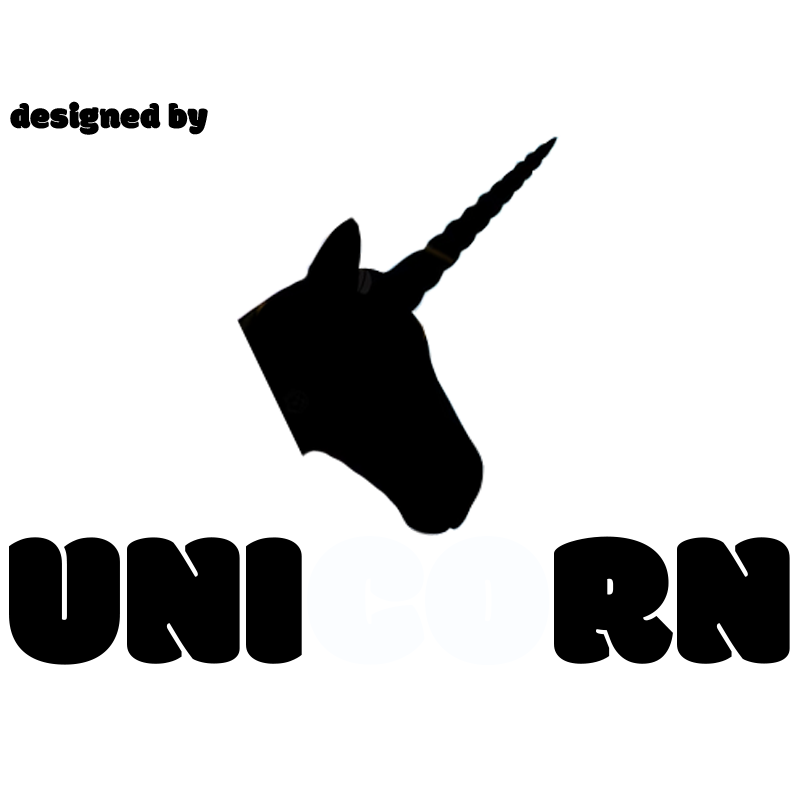
<style>
.page{position:relative;width:800px;height:800px;background:#ffffff}
.page>*{position:absolute;margin:0}
.t1{font:36px "Modak";color:#000000}
.t2{font:194.6px "Modak";color:#000000}
.t3{font:194.6px "Modak";color:#fbfdff}
</style>
<div class="page">
<p class="t1" style="left:10px;top:101px;width:198px;height:34px">designed by</p>
<p class="t2" style="left:9px;top:536px;width:781px;height:130px">UNI<span class="t3">CO</span>RN</p>
</div>
